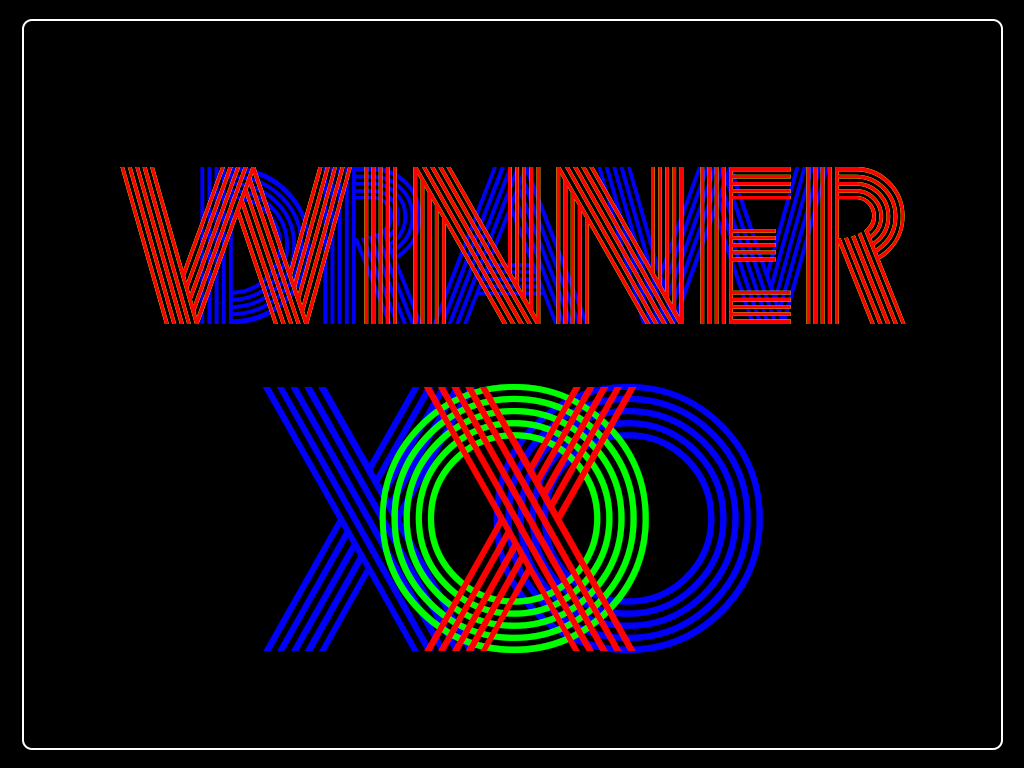
<style>
.page{position:relative;width:1024px;height:768px;background:#000000}
.page>*{position:absolute;margin:0}
.t1{font:198.6px "Prisma";letter-spacing:0.02em;color:#ff0000}
.t2{font:198.6px "Prisma";letter-spacing:0.02em;color:#0000ff}
.t3{font:336.6px "Prisma";letter-spacing:0.02em;color:#0000ff}
.t4{font:336.6px "Prisma";letter-spacing:0.02em;color:#00ff00}
.t5{font:336.6px "Prisma";letter-spacing:0.02em;color:#ff0000}
</style>
<div class="page">
<p class="t1" style="left:120px;top:167px;width:786px;height:157px">WINNER</p>
<p class="t1" style="left:120px;top:167px;width:786px;height:157px">WINNER</p>
<p class="t2" style="left:200px;top:167px;width:629px;height:157px">DRAW</p>
<p class="t3" style="left:262px;top:384px;width:501px;height:269px">XO</p>
<p class="t4" style="left:379px;top:384px;width:270px;height:269px">O</p>
<p class="t5" style="left:423px;top:387px;width:214px;height:264px">X</p>
</div>
